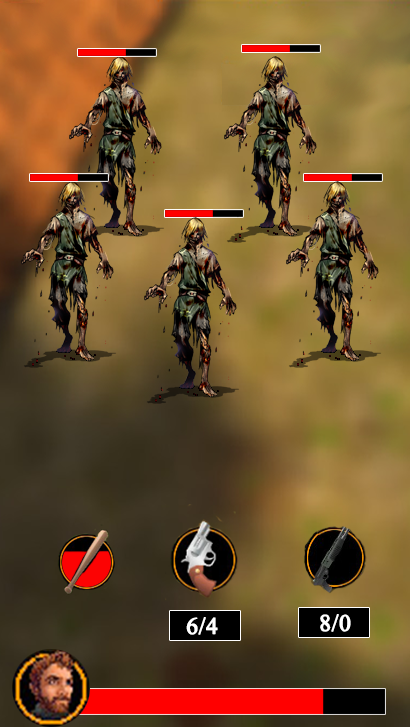
<style>
.page{position:relative;width:410px;height:727px}
.page>*{position:absolute;margin:0}
.t1{font:29.2px "Aparajita";color:#ffffff;font-weight:bold}
</style>
<div class="page">
<p class="t1" style="left:186px;top:617px;width:32px;height:18px">6/4</p>
<p class="t1" style="left:320px;top:614px;width:31px;height:18px">8/0</p>
</div>
